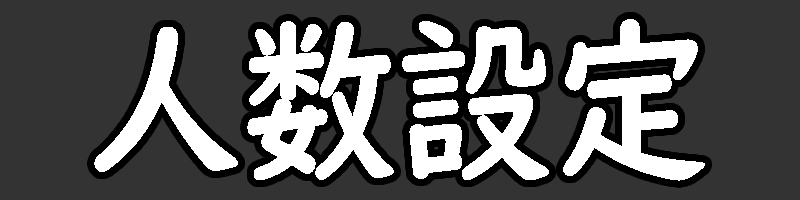
<style>
.page{position:relative;width:800px;height:200px;background:#333333}
.page>*{position:absolute;margin:0}
.t1{font:176.7px "UDDigiKyokashoNK-B";color:#ffffff;scale:0.88 1}
</style>
<div class="page">
<p class="t1" style="left:94px;top:19px;width:611px;height:162px">人数設定</p>
</div>
